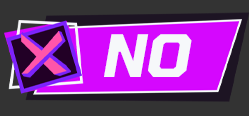
<style>
.page{position:relative;width:249px;height:116px;background:#333333}
.page>*{position:absolute;margin:0}
.t1{font:58.2px "Tomorrow-BoldItalic";letter-spacing:-0.02em;color:#f6f8fa}
</style>
<div class="page">
<p class="t1" style="left:104px;top:34px;width:88px;height:43px">NO</p>
</div>
